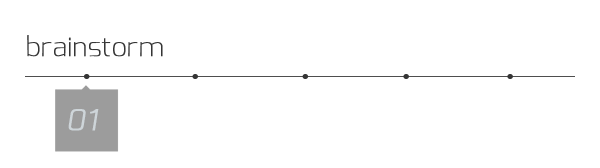
<style>
.page{position:relative;width:600px;height:168px;background:#ffffff}
.page>*{position:absolute;margin:0}
.t1{font:26.3px "Exo-Thin";color:#353535;font-weight:bold}
.t2{font:28.5px "Exo-LightItalic";color:#ced5d9;font-weight:bold}
</style>
<div class="page">
<p class="t1" style="left:27px;top:35px;width:136px;height:22px">brainstorm</p>
<p class="t2" style="left:68px;top:109px;width:31px;height:22px">01</p>
</div>
